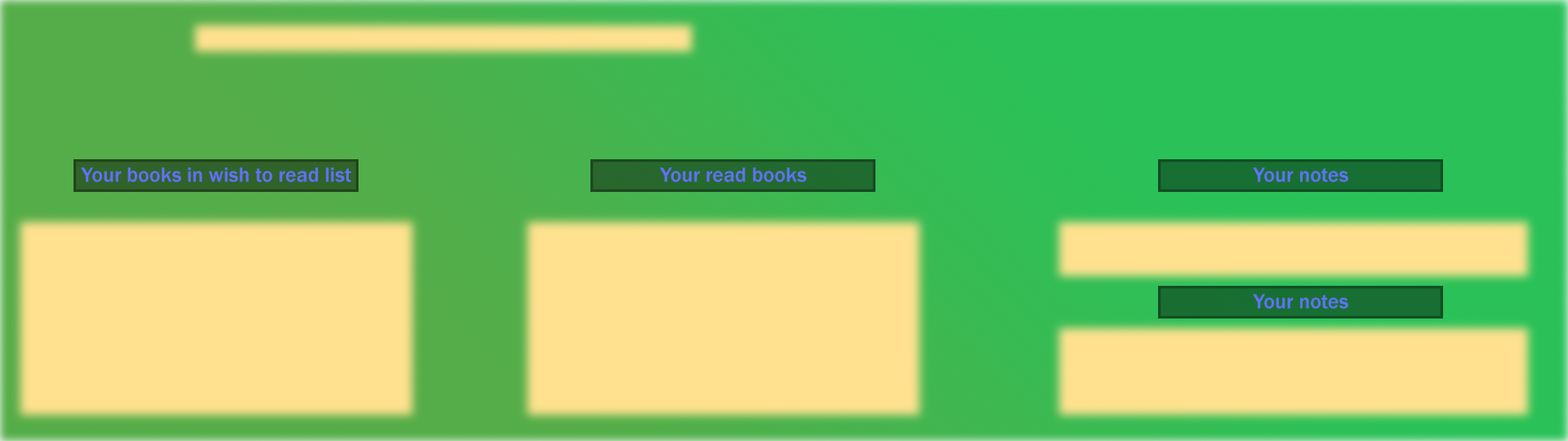
<style>
.page{position:relative;width:1568px;height:441px;background:#ffe18f}
.page>*{position:absolute;margin:0}
.t1{font:21.2px "FranklinGothic-Medium";color:#6072f8}
</style>
<div class="page">
<p class="t1" style="left:81px;top:167px;width:270px;height:15px">Your books in wish to read list</p>
<p class="t1" style="left:660px;top:167px;width:147px;height:15px">Your read books</p>
<p class="t1" style="left:1253px;top:167px;width:95px;height:15px">Your notes</p>
<p class="t1" style="left:1253px;top:294px;width:95px;height:15px">Your notes</p>
</div>
